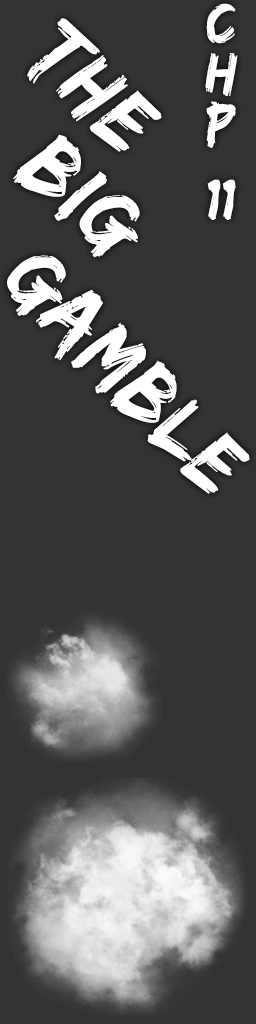
<style>
.page{position:relative;width:256px;height:1024px;background:#333333}
.page>*{position:absolute;margin:0}
.t1{font:60px/25.1px "EdoSZ";letter-spacing:0.03em;color:#ffffff}
.t2{font:91.3px "EdoSZ";letter-spacing:0.03em;color:#ffffff;scale:0.96 1}
.t3{font:90.5px "EdoSZ";letter-spacing:0.03em;color:#ffffff;scale:0.95 1}
</style>
<div class="page">
<p class="t1" style="left:205px;top:3px;width:33px;height:217px;text-align:center">C<br><br>H<br><br>P<br><br><br>11</p>
<p class="t2" style="left:27px;top:18px;width:135px;height:134px;rotate:45deg">The</p>
<p class="t2" style="left:13px;top:134px;width:127px;height:124px;rotate:41deg">Big</p>
<p class="t3" style="left:7px;top:255px;width:243px;height:239px;rotate:46deg">GAmble</p>
</div>
